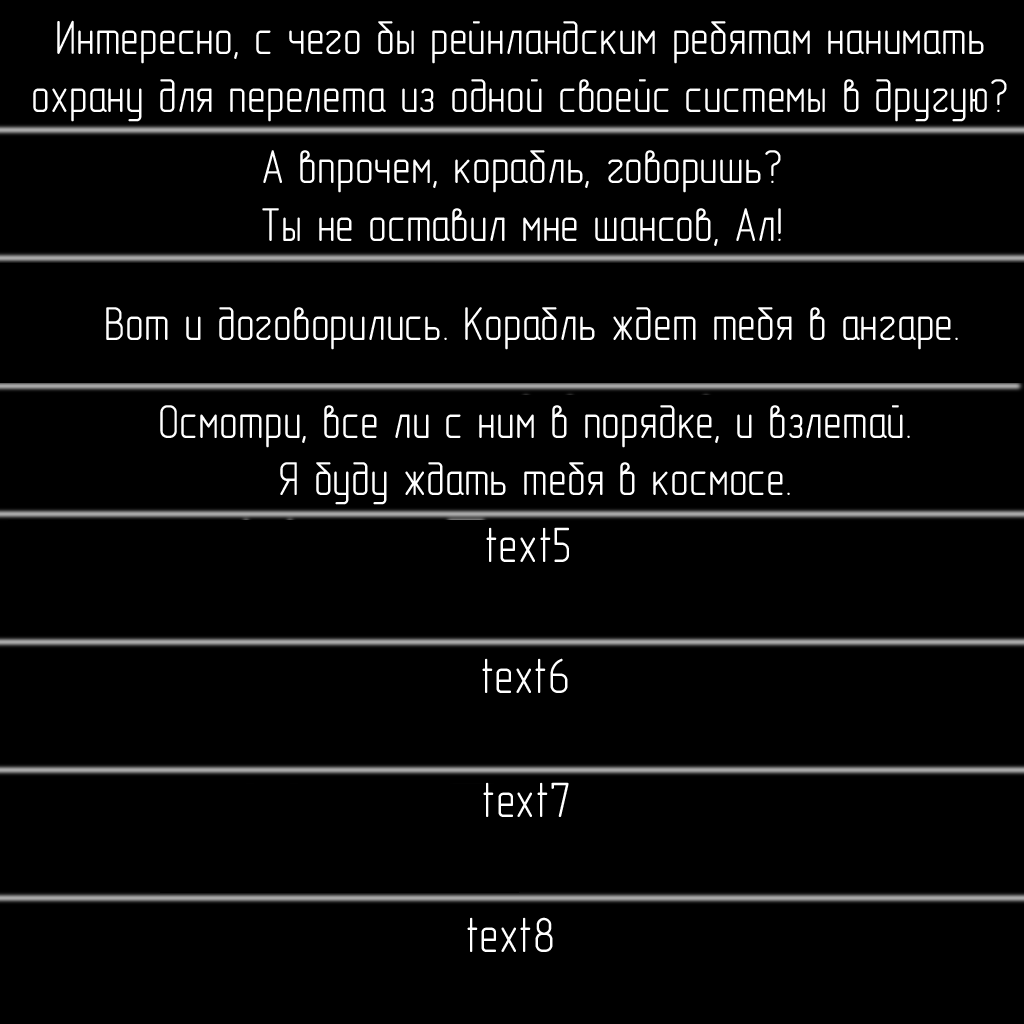
<style>
.page{position:relative;width:1024px;height:1024px;background:#000000}
.page>*{position:absolute;margin:0}
.t1{font:48px "GOST-2.304-81typeA";color:#ffffff}
.t2{font:50px "GOST-2.304-81typeA";color:#ffffff}
</style>
<div class="page">
<p class="t1" style="left:33px;top:20px;width:974px;height:102px;text-align:center">Интересно, с чего бы рейнландским ребятам нанимать<br>охрану для перелета из одной своейс системы в другую?</p>
<p class="t1" style="left:262px;top:150px;width:519px;height:96px;text-align:center">А впрочем, корабль, говоришь?<br>Ты не оставил мне шансов, Ал!</p>
<p class="t1" style="left:106px;top:307px;width:852px;height:43px">Вот и договорились. Корабль ждет тебя в ангаре.</p>
<p class="t1" style="left:160px;top:405px;width:750px;height:100px;text-align:center">Осмотри, все ли с ним в порядке, и взлетай.<br>Я буду ждать тебя в космосе.</p>
<p class="t2" style="left:486px;top:527px;width:83px;height:35px">text5</p>
<p class="t2" style="left:482px;top:658px;width:86px;height:35px">text6</p>
<p class="t2" style="left:483px;top:782px;width:86px;height:35px">text7</p>
<p class="t2" style="left:467px;top:917px;width:86px;height:35px">text8</p>
</div>
